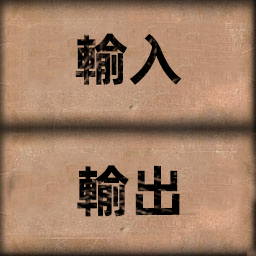
<style>
.page{position:relative;width:256px;height:256px}
.page>*{position:absolute;margin:0}
.t1{font:56px "AlibabaPuHuiTiB";color:#000000}
</style>
<div class="page">
<p class="t1" style="left:75px;top:33px;width:107px;height:52px">輸入</p>
<p class="t1" style="left:77px;top:165px;width:103px;height:52px">輸出</p>
</div>
